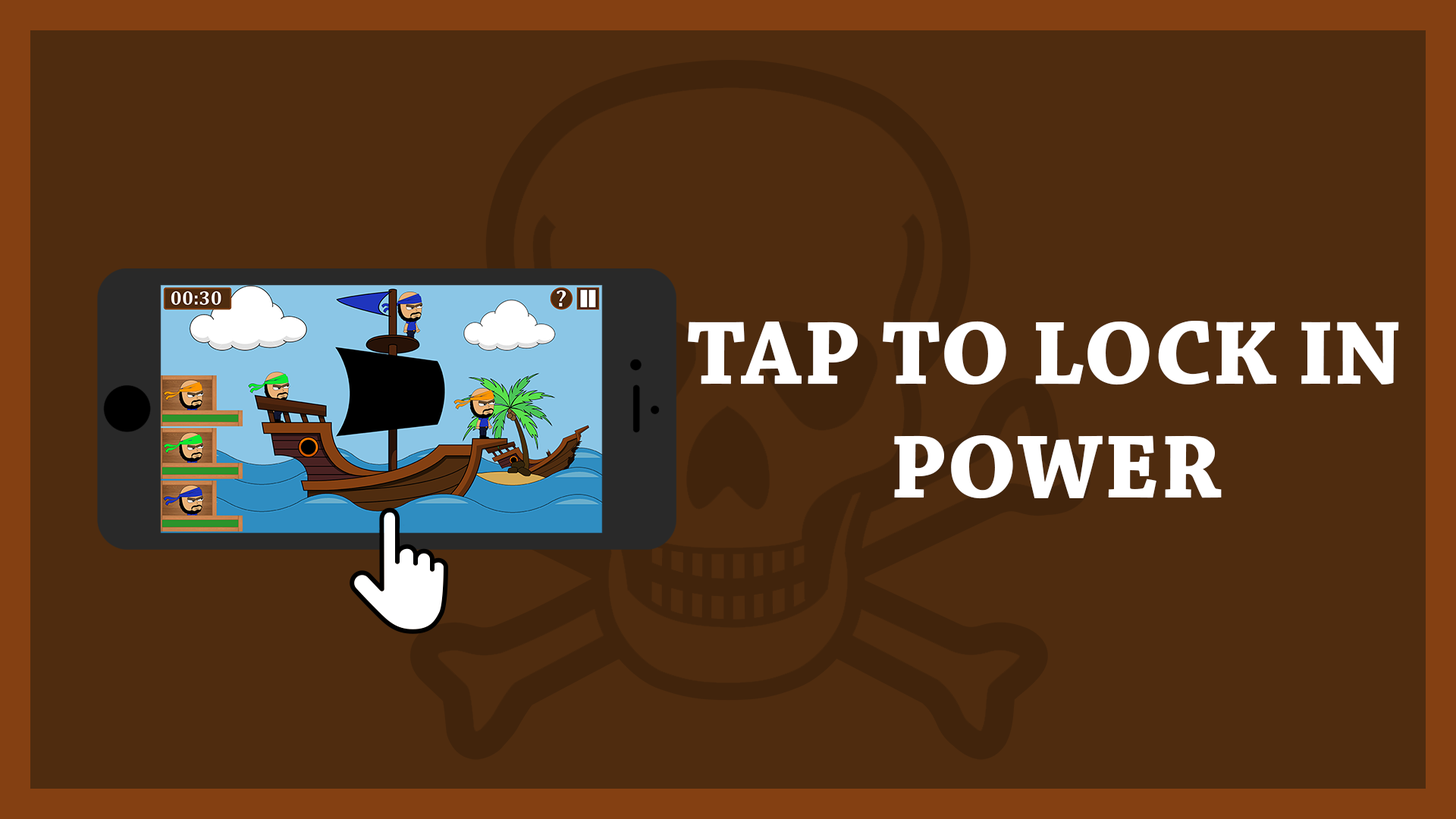
<style>
.page{position:relative;width:1456px;height:819px;background:#4f2c0f}
.page>*{position:absolute;margin:0}
.t1{font:94.8px "ChaparralPro-Bold";color:#ffffff}
</style>
<div class="page">
<p class="t1" style="left:688px;top:321px;width:711px;height:178px;text-align:center">TAP TO LOCK IN <br>POWER</p>
</div>
